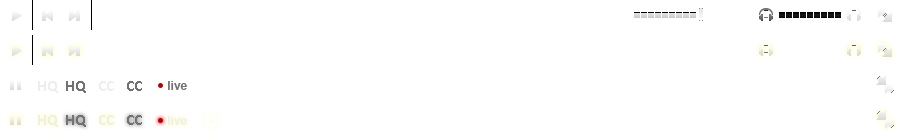
<style>
.page{position:relative;width:900px;height:140px;background:#ffffff}
.page>*{position:absolute;margin:0}
.t1{font:16px "Calibri-Bold";color:#eeeeee}
.t2{font:16px "Calibri-Bold";color:#727272}
.t3{font:12px "Arial-BoldMT";color:#727272}
.t4{font:12px "Arial-BoldMT";color:#eeeeee}
</style>
<div class="page">
<p class="t1" style="left:38px;top:81px;width:20px;height:12px">HQ</p>
<p class="t2" style="left:66px;top:81px;width:20px;height:12px">HQ</p>
<p class="t1" style="left:99px;top:81px;width:15px;height:10px">CC</p>
<p class="t2" style="left:127px;top:81px;width:15px;height:10px">CC</p>
<p class="t3" style="left:168px;top:81px;width:19px;height:9px">live</p>
<p class="t1" style="left:38px;top:115px;width:20px;height:12px">HQ</p>
<p class="t2" style="left:66px;top:115px;width:20px;height:12px">HQ</p>
<p class="t1" style="left:99px;top:115px;width:15px;height:10px">CC</p>
<p class="t2" style="left:127px;top:115px;width:15px;height:10px">CC</p>
<p class="t4" style="left:168px;top:116px;width:19px;height:9px">live</p>
</div>
